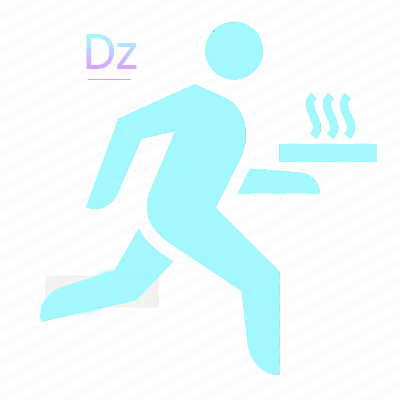
<style>
.page{position:relative;width:400px;height:400px;background:#ffffff}
.page>*{position:absolute;margin:0}
.t1{font:48px "Tahoma"}
</style>
<div class="page">
<p class="t1" style="left:86px;top:34px;width:51px;height:35px">Dz</p>
</div>
